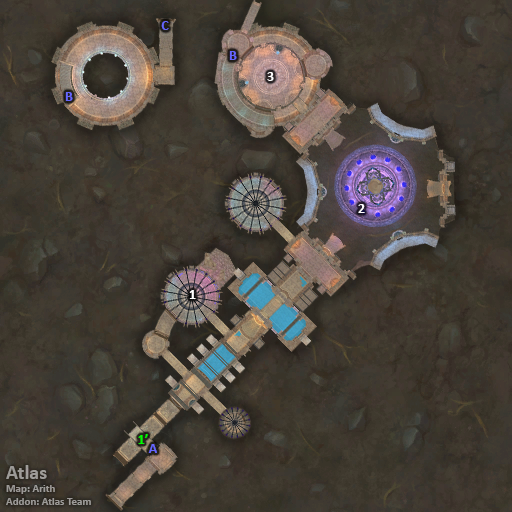
<style>
.page{position:relative;width:512px;height:512px}
.page>*{position:absolute;margin:0}
.t1{font:14px "Calibri-Bold";color:#6666ff}
.t2{font:14px "Calibri-Bold";color:#ffffff}
.t3{font:14px "Calibri-Bold";color:#00ff00}
.t4{font:11px "Calibri-Bold";color:#9d9b98}
.t5{font:20px "Calibri-Bold";color:#9d9b98}
</style>
<div class="page">
<p class="t1" style="left:161px;top:21px;width:8px;height:9px">C</p>
<p class="t1" style="left:229px;top:51px;width:8px;height:9px">B</p>
<p class="t2" style="left:267px;top:72px;width:7px;height:9px">3</p>
<p class="t1" style="left:65px;top:92px;width:8px;height:9px">B</p>
<p class="t2" style="left:358px;top:204px;width:7px;height:9px">2</p>
<p class="t2" style="left:189px;top:290px;width:7px;height:9px">1</p>
<p class="t3" style="left:138px;top:434px;width:10px;height:10px">1’</p>
<p class="t1" style="left:148px;top:444px;width:9px;height:9px">A</p>
<p class="t4" style="left:6px;top:465px;width:85px;height:40px"><span class="t5">Atlas<br></span>Map: Arith<br>Addon: Atlas Team</p>
</div>
